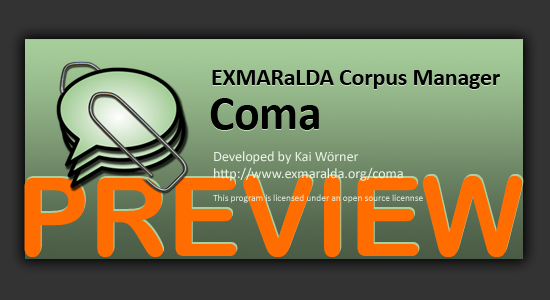
<style>
.page{position:relative;width:550px;height:300px;background:#333333}
.page>*{position:absolute;margin:0}
.t1{font:23.8px "Calibri-Bold";letter-spacing:-0.005em;color:#010101}
.t2{font:47.6px "Calibri-Bold";letter-spacing:-0.005em;color:#000000}
.t3{font:9.5px "Calibri";letter-spacing:-0.005em;color:#e8f2e5}
.t4{font:14.3px "Calibri";letter-spacing:-0.005em;color:#e8f2e5}
.t5{font:109.8px "ArialRoundedMTBold";letter-spacing:-0.005em;color:#ff6c00}
</style>
<div class="page">
<p class="t1" style="left:212px;top:71px;width:288px;height:19px">EXMARaLDA Corpus Manager</p>
<p class="t1" style="left:212px;top:70px;width:288px;height:19px">EXMARaLDA Corpus Manager</p>
<p class="t2" style="left:210px;top:99px;width:109px;height:32px">Coma</p>
<p class="t2" style="left:210px;top:98px;width:109px;height:32px">Coma</p>
<p class="t3" style="left:213px;top:151px;width:210px;height:52px"><span class="t4">Developed by Kai Wörner<br>http://www.exmaralda.org/coma<br></span><br>This program is licensed under an open source licennse</p>
<p class="t5" style="left:25px;top:174px;width:499px;height:81px">PREVIEW</p>
<p class="t5" style="left:24px;top:176px;width:499px;height:81px">PREVIEW</p>
</div>
